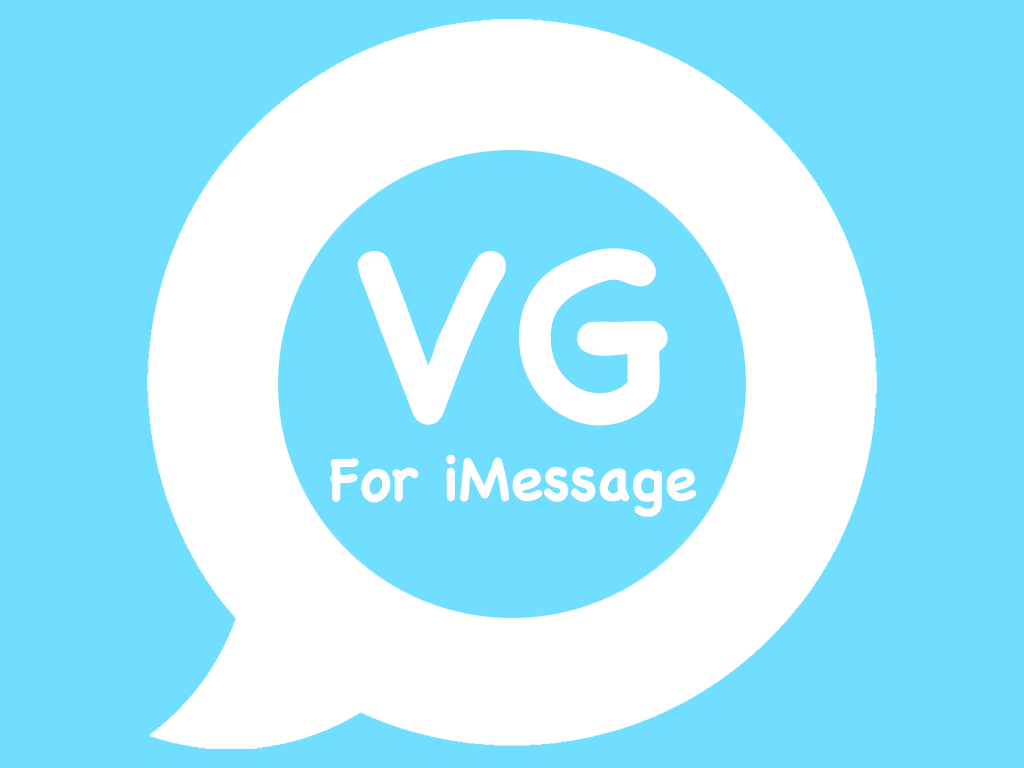
<style>
.page{position:relative;width:1024px;height:768px;background:#71ddff}
.page>*{position:absolute;margin:0}
.t1{font:236px "ChalkboardSE-Bold";color:#ffffff}
.t2{font:60px "ChalkboardSE-Bold";color:#ffffff}
</style>
<div class="page">
<p class="t1" style="left:357px;top:248px;width:311px;height:178px">VG</p>
<p class="t2" style="left:330px;top:454px;width:367px;height:63px">For iMessage</p>
</div>
